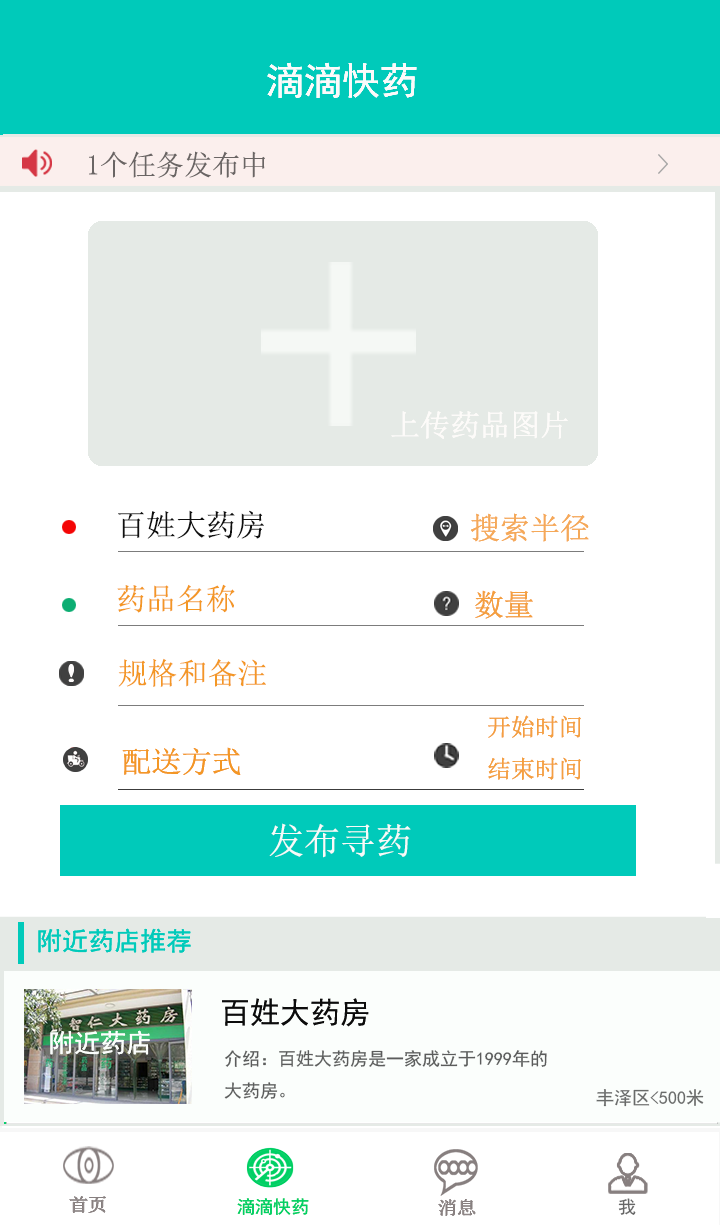
<style>
.page{position:relative;width:720px;height:1225px;background:#ffffff}
.page>*{position:absolute;margin:0}
.t1{font:28px "SimSun";color:#6a6564}
.t2{font:30px "SimSun";color:#fdfbf9}
.t3{font:30px "SimSun";color:#0f0f0f}
.t4{font:30px "SimSun";color:#f5a959}
.t5{font:30px "SimSun";color:#f39725}
.t6{font:30px "SimSun";color:#f49f40}
.t7{font:24px "SimSun";color:#f49f40}
.t8{font:36px "SimSun";color:#f8faf9}
.t9{font:26px "SimHei";color:#00caba}
.t10{font:30px "SimHei";color:#0c0c0c}
.t11{font:18px "SimHei";color:#5b5c5c}
.t12{font:18px "SimHei";color:#696b6a}
.t13{font:18px "SimHei";color:#00d064}
.t14{font:18px "SimHei";color:#676767}
</style>
<div class="page">
<p class="t1" style="left:89px;top:151px;width:176px;height:27px">1个任务发布中</p>
<p class="t2" style="left:391px;top:411px;width:177px;height:28px">上传药品图片</p>
<p class="t2" style="left:391px;top:411px;width:177px;height:28px">上传药品图片</p>
<p class="t3" style="left:118px;top:510px;width:146px;height:29px">百姓大药房</p>
<p class="t4" style="left:471px;top:513px;width:118px;height:29px">搜索半径</p>
<p class="t4" style="left:471px;top:513px;width:118px;height:29px">搜索半径</p>
<p class="t5" style="left:117px;top:584px;width:118px;height:29px">药品名称</p>
<p class="t6" style="left:475px;top:590px;width:58px;height:29px">数量</p>
<p class="t6" style="left:475px;top:590px;width:58px;height:29px">数量</p>
<p class="t5" style="left:118px;top:658px;width:148px;height:29px">规格和备注</p>
<p class="t7" style="left:488px;top:715px;width:93px;height:65px">开始时间<br>结束时间</p>
<p class="t7" style="left:488px;top:715px;width:93px;height:65px">开始时间<br>结束时间</p>
<p class="t5" style="left:122px;top:747px;width:119px;height:28px">配送方式</p>
<p class="t5" style="left:122px;top:747px;width:119px;height:28px">配送方式</p>
<p class="t8" style="left:269px;top:823px;width:142px;height:35px">发布寻药</p>
<p class="t8" style="left:269px;top:823px;width:142px;height:35px">发布寻药</p>
<p class="t9" style="left:38px;top:928px;width:153px;height:25px">附近药店推荐</p>
<p class="t9" style="left:38px;top:928px;width:153px;height:25px">附近药店推荐</p>
<p class="t10" style="left:222px;top:998px;width:147px;height:29px">百姓大药房</p>
<p class="t10" style="left:222px;top:998px;width:147px;height:29px">百姓大药房</p>
<p class="t11" style="left:224px;top:1050px;width:323px;height:49px">介绍：百姓大药房是一家成立于1999年的<br>大药房。</p>
<p class="t12" style="left:596px;top:1089px;width:108px;height:18px">丰泽区&lt;500米</p>
<p class="t13" style="left:237px;top:1198px;width:72px;height:17px">滴滴快药</p>
<p class="t13" style="left:237px;top:1198px;width:72px;height:17px">滴滴快药</p>
<p class="t14" style="left:618px;top:1198px;width:18px;height:17px">我</p>
</div>
